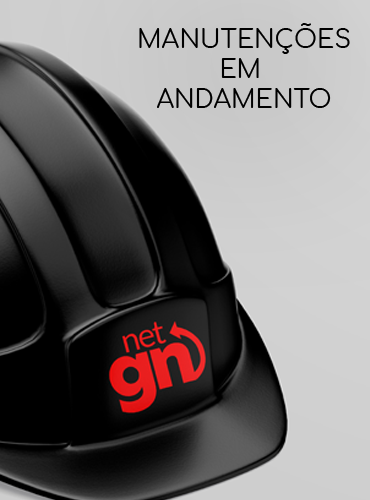
<style>
.page{position:relative;width:370px;height:500px}
.page>*{position:absolute;margin:0}
.t1{font:25px "Comfortaa-Regular";color:#000000}
</style>
<div class="page">
<p class="t1" style="left:139px;top:23px;width:211px;height:85px;text-align:center">MANUTENÇÕES<br>EM <br>ANDAMENTO</p>
</div>
